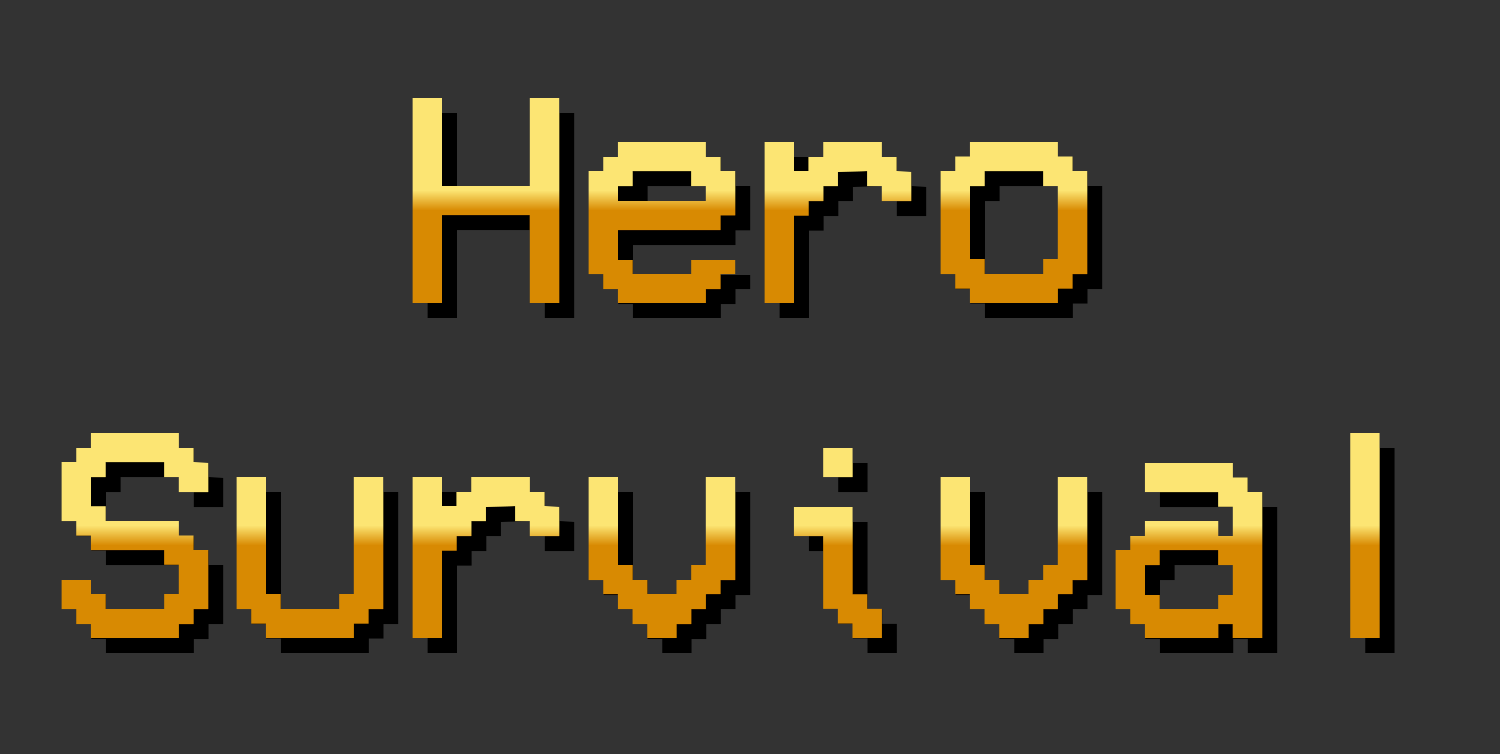
<style>
.page{position:relative;width:1500px;height:754px;background:#333333}
.page>*{position:absolute;margin:0}
.t1{font:300px "VCROSDMono"}
</style>
<div class="page">
<p class="t1" style="left:412px;top:98px;width:676px;height:205px">Hero</p>
<p class="t1" style="left:61px;top:433px;width:1319px;height:205px">Survival</p>
<p class="t1" style="left:76px;top:448px;width:1319px;height:205px">Survival</p>
</div>
